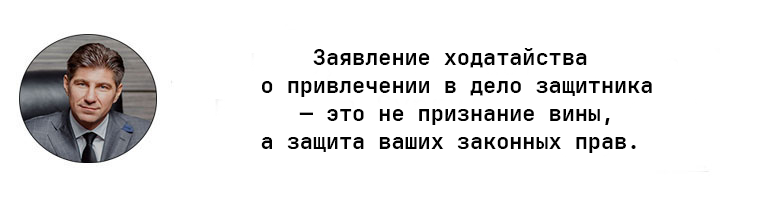
<style>
.page{position:relative;width:768px;height:200px;background:#ffffff}
.page>*{position:absolute;margin:0}
.t1{font:21.8px/28px "JetBrainsMono-Bold";color:#010101}
</style>
<div class="page">
<p class="t1" style="left:261px;top:48px;width:391px;height:105px;text-align:center">Заявление ходатайства<br> о привлечении в дело защитника<br> — это не признание вины,<br> а защита ваших законных прав.</p>
</div>
